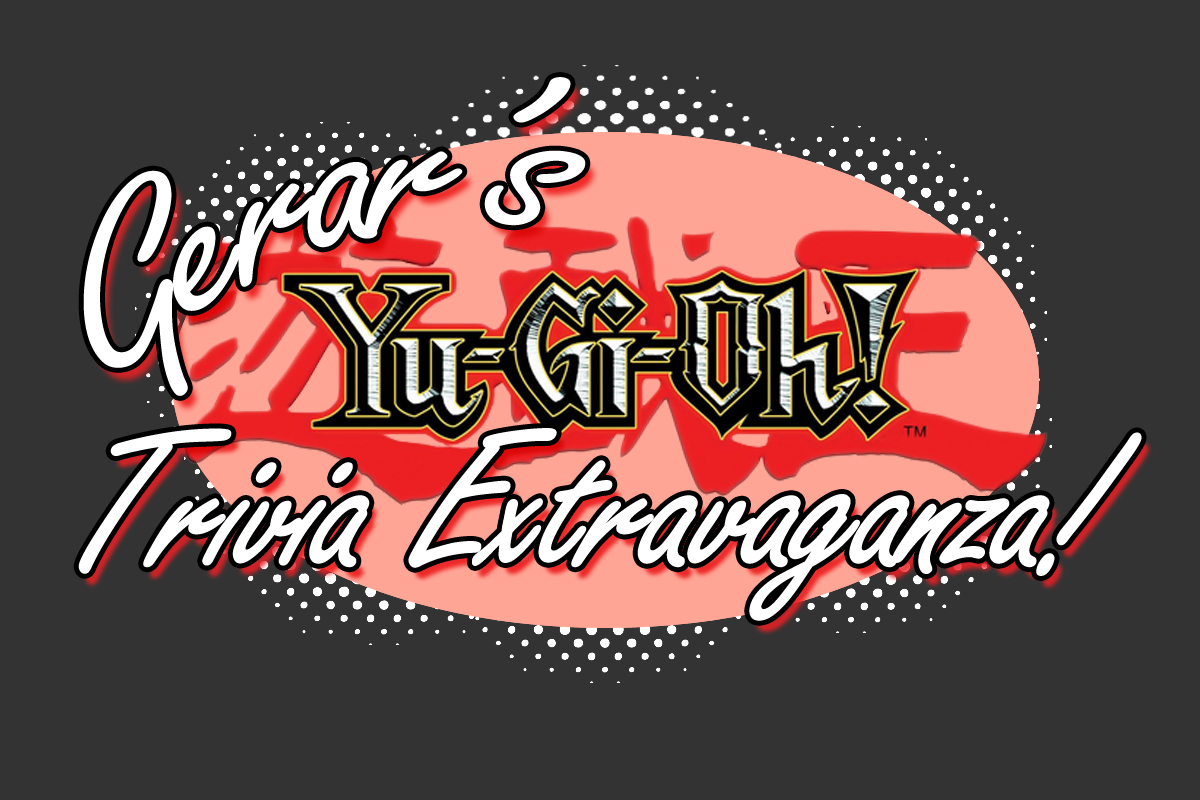
<style>
.page{position:relative;width:1200px;height:800px;background:#333333}
.page>*{position:absolute;margin:0}
.t1{font:229.2px "FreestyleScript-Regular";letter-spacing:-0.05em;color:#ffffff}
.t2{font:208.3px "FreestyleScript-Regular";letter-spacing:-0.05em;color:#ffffff;font-weight:bold;font-style:italic}
</style>
<div class="page">
<p class="t1" style="left:83px;top:77px;width:503px;height:319px;rotate:-19deg">Gerar’s</p>
<p class="t2" style="left:78px;top:428px;width:1064px;height:193px">Trivia Extravaganza!</p>
</div>
